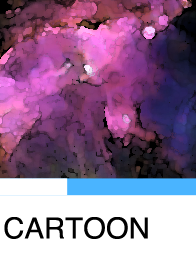
<style>
.page{position:relative;width:196px;height:264px;background:#ffffff}
.page>*{position:absolute;margin:0}
.t1{font:28.9px "Helvetica";color:#000000}
</style>
<div class="page">
<p class="t1" style="left:4px;top:217px;width:144px;height:22px">CARTOON</p>
</div>
